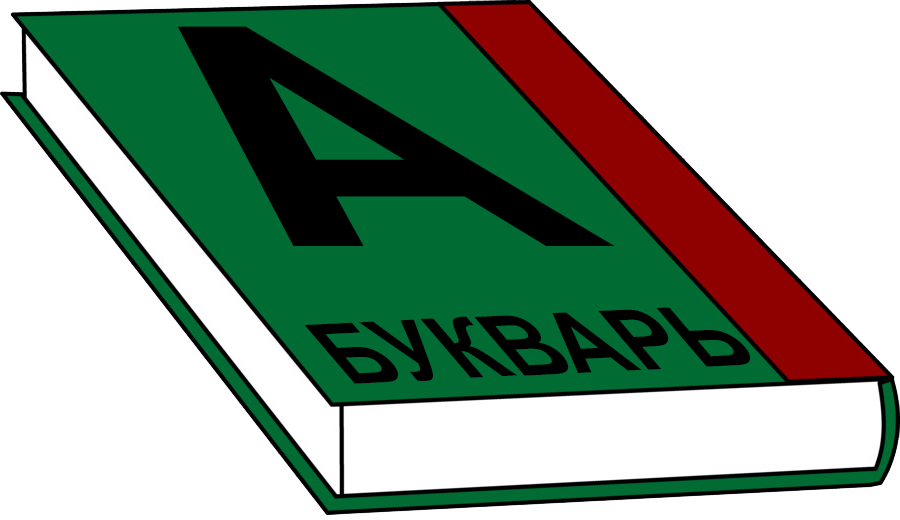
<style>
.page{position:relative;width:900px;height:520px;background:#ffffff}
.page>*{position:absolute;margin:0}
.t1{font:457.6px "Arial-BoldMT";color:#000000}
.t2{font:107.9px "Arial-BoldMT";color:#000000;scale:0.82 1}
</style>
<div class="page">
<p class="t1" style="left:177px;top:26px;width:438px;height:220px;rotate:180deg">А</p>
<p class="t2" style="left:304px;top:307px;width:447px;height:77px;rotate:-3deg">БУКВАРЬ</p>
</div>
